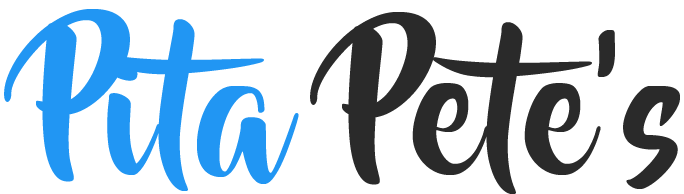
<style>
.page{position:relative;width:684px;height:194px;background:#ffffff}
.page>*{position:absolute;margin:0}
.t1{font:170px "BeyondTheMountains";color:#2196f3}
.t2{font:170px "BeyondTheMountains";color:#2a2a2a}
</style>
<div class="page">
<p class="t1" style="left:4px;top:9px;width:295px;height:182px">Pita</p>
<p class="t2" style="left:310px;top:12px;width:370px;height:182px">Pete’s</p>
</div>
